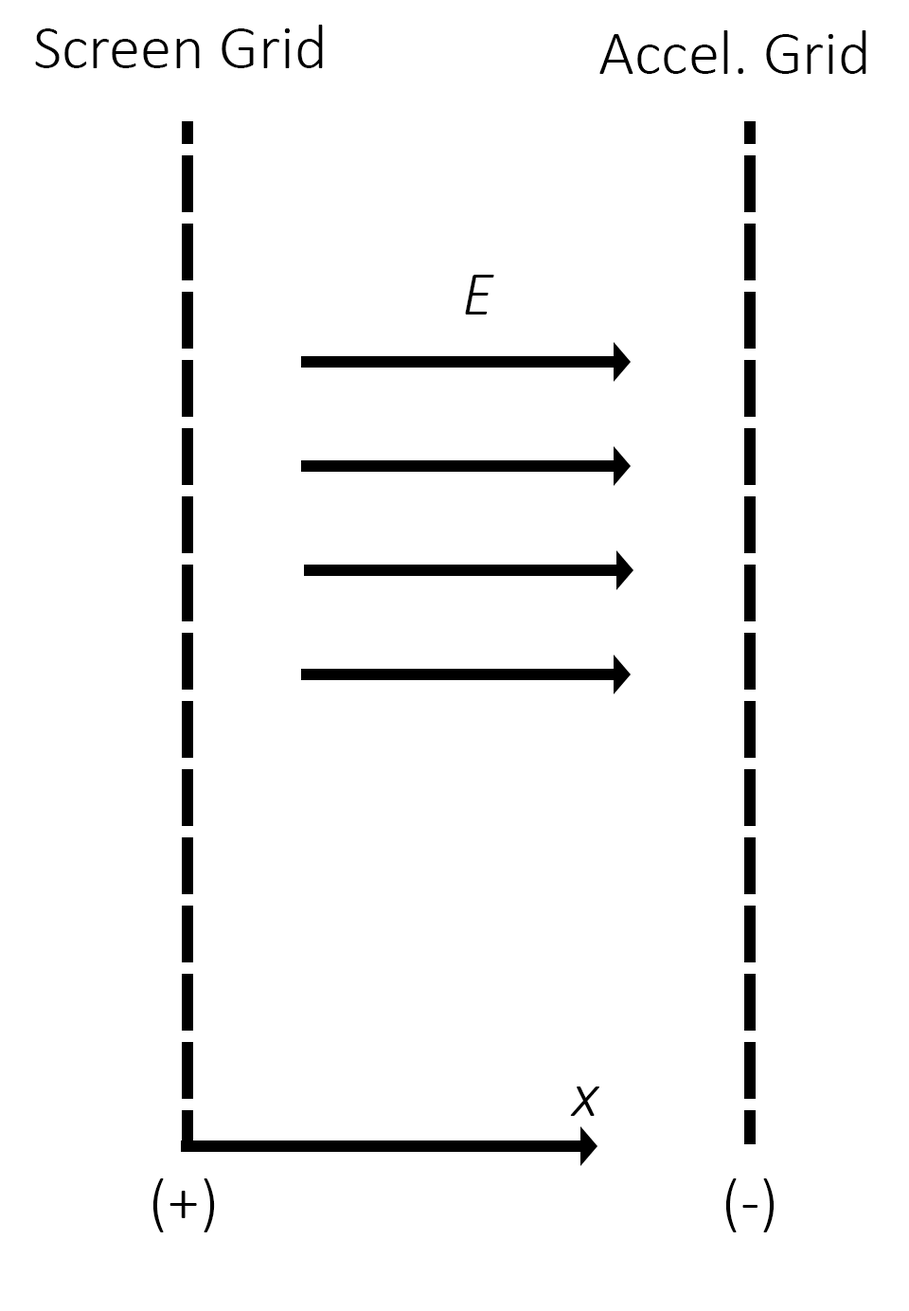
<style>
.page{position:relative;width:909px;height:1311px;background:#ffffff}
.page>*{position:absolute;margin:0}
.t1{font:63.2px "Calibri-Light";color:#000000}
.t2{font:63.2px "Calibri-LightItalic";color:#000000}
</style>
<div class="page">
<p class="t1" style="left:35px;top:25px;width:288px;height:43px">Screen Grid</p>
<p class="t1" style="left:600px;top:30px;width:267px;height:44px">Accel. Grid</p>
<p class="t2" style="left:465px;top:275px;width:30px;height:40px">E</p>
<p class="t2" style="left:570px;top:1087px;width:30px;height:29px">x</p>
<p class="t1" style="left:153px;top:1179px;width:62px;height:54px">(+)</p>
<p class="t1" style="left:726px;top:1179px;width:49px;height:54px">(-)</p>
</div>
